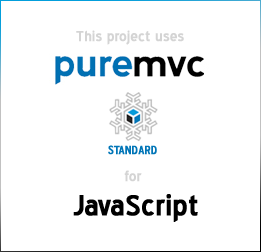
<style>
.page{position:relative;width:261px;height:252px;background:#ffffff}
.page>*{position:absolute;margin:0}
.t1{font:18px "BlueHighway";color:#d4d4d4;font-weight:bold}
.t2{font:36px "BlueHighway";color:#000000;font-weight:bold}
</style>
<div class="page">
<p class="t1" style="left:76px;top:30px;width:108px;height:15px">This project uses</p>
<p class="t1" style="left:124px;top:170px;width:18px;height:12px">for</p>
<p class="t2" style="left:73px;top:194px;width:125px;height:28px">JavaScript</p>
</div>
